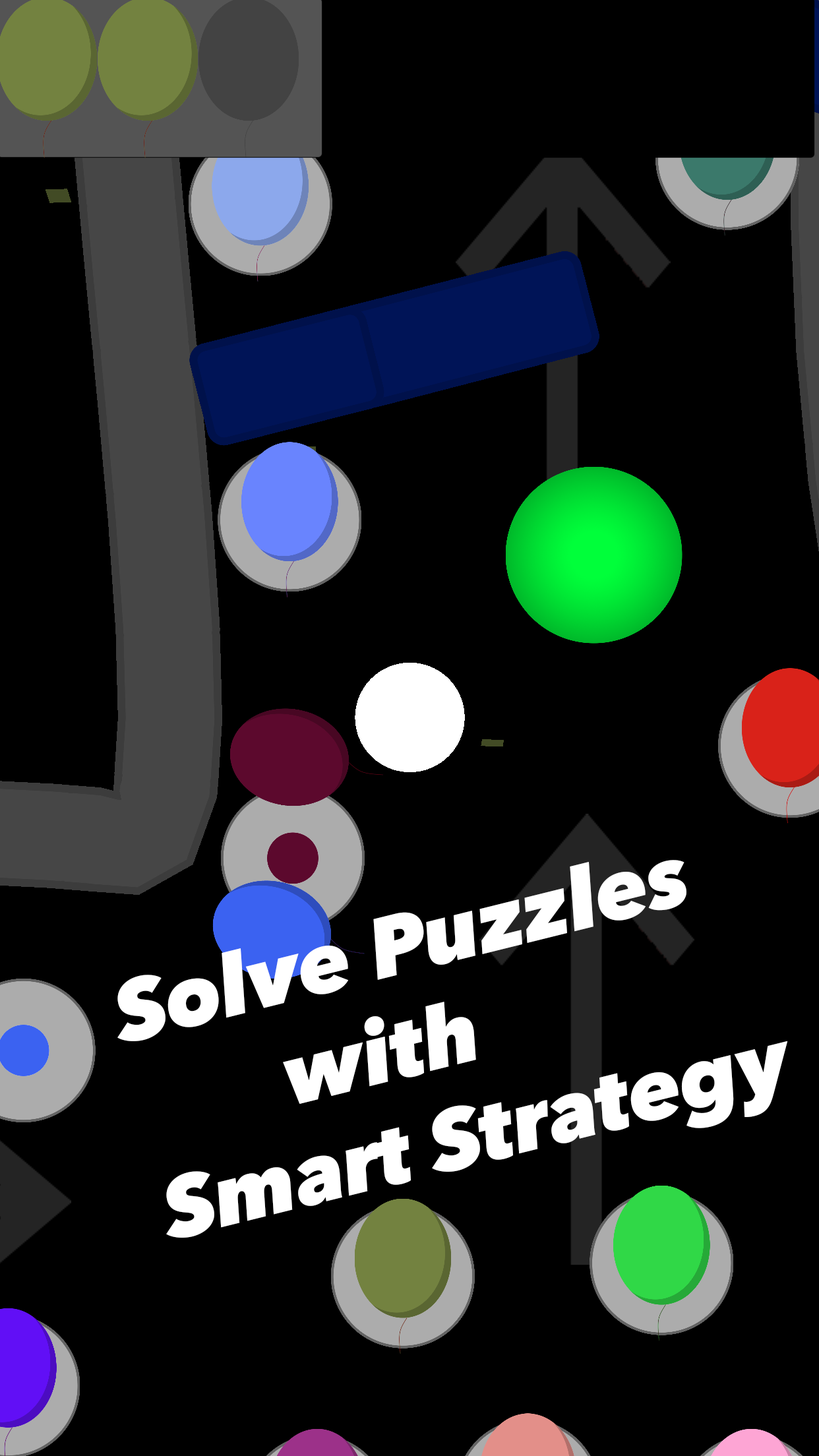
<style>
.page{position:relative;width:819px;height:1456px;background:#000000}
.page>*{position:absolute;margin:0}
.t1{font:84.4px "AvenirNext-HeavyItalic";color:#ffffff}
</style>
<div class="page">
<p class="t1" style="left:117px;top:860px;width:671px;height:378px;rotate:-14deg">Solve Puzzles <br>       with <br>Smart Strategy</p>
</div>
